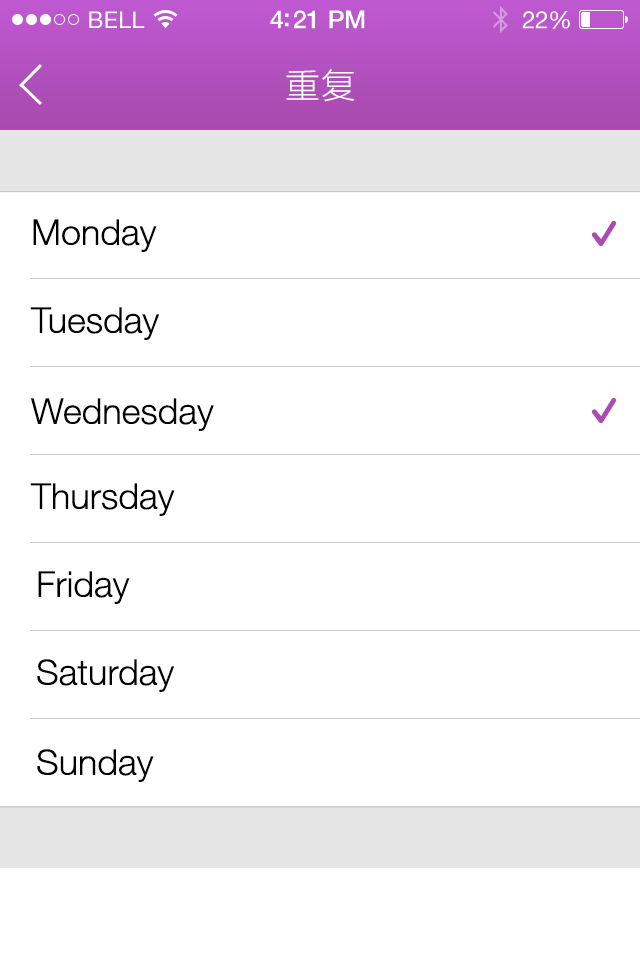
<style>
.page{position:relative;width:640px;height:960px;background:#ffffff}
.page>*{position:absolute;margin:0}
.t1{font:34px "STHeitiSC-Medium";letter-spacing:-0.02em;color:#ffffff}
.t2{font:36px "HelveticaNeueLT-Light";color:#000000}
</style>
<div class="page">
<p class="t1" style="left:286px;top:69px;width:69px;height:33px">重复</p>
<p class="t2" style="left:33px;top:219px;width:124px;height:33px">Monday</p>
<p class="t2" style="left:30px;top:307px;width:129px;height:33px">Tuesday</p>
<p class="t2" style="left:31px;top:398px;width:183px;height:33px">Wednesday</p>
<p class="t2" style="left:30px;top:483px;width:145px;height:33px">Thursday</p>
<p class="t2" style="left:38px;top:571px;width:92px;height:33px">Friday</p>
<p class="t2" style="left:37px;top:659px;width:137px;height:33px">Saturday</p>
<p class="t2" style="left:37px;top:749px;width:117px;height:33px">Sunday</p>
</div>
